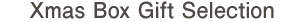
<style>
.page{position:relative;width:303px;height:22px;background:#ffffff}
.page>*{position:absolute;margin:0}
.t1{font:22px "FutoGoB101Pr5-Bold";color:#4c4843}
</style>
<div class="page">
<p class="t1" style="left:29px;top:1px;width:245px;height:18px">Xmas Box Gift Selection</p>
</div>
